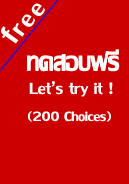
<style>
.page{position:relative;width:129px;height:184px;background:#cc0001}
.page>*{position:absolute;margin:0}
.t1{font:36px "LilyUPC";color:#fbfaf8}
.t2{font:43.7px "LilyUPC";color:#fbfaf8}
.t3{font:36px "LilyUPC";color:#fffcfc}
.t4{font:24px "LilyUPC";color:#fffcfc}
.t5{font:20px "LilyUPC";color:#fffcfc}
</style>
<div class="page">
<p class="t1" style="left:31px;top:3px;width:14px;height:13px;rotate:-53deg">e</p>
<p class="t1" style="left:21px;top:14px;width:14px;height:13px;rotate:-58deg">e</p>
<p class="t2" style="left:1px;top:26px;width:18px;height:18px;rotate:-49deg">f</p>
<p class="t1" style="left:12px;top:23px;width:13px;height:14px;rotate:-54deg">r</p>
<p class="t3" style="left:27px;top:50px;width:93px;height:22px">ทดสอบฟรี</p>
<p class="t3" style="left:27px;top:49px;width:93px;height:22px">ทดสอบฟรี</p>
<p class="t4" style="left:29px;top:81px;width:84px;height:16px">Let’s try it !</p>
<p class="t5" style="left:28px;top:111px;width:83px;height:11px">(200 Choices)</p>
</div>
